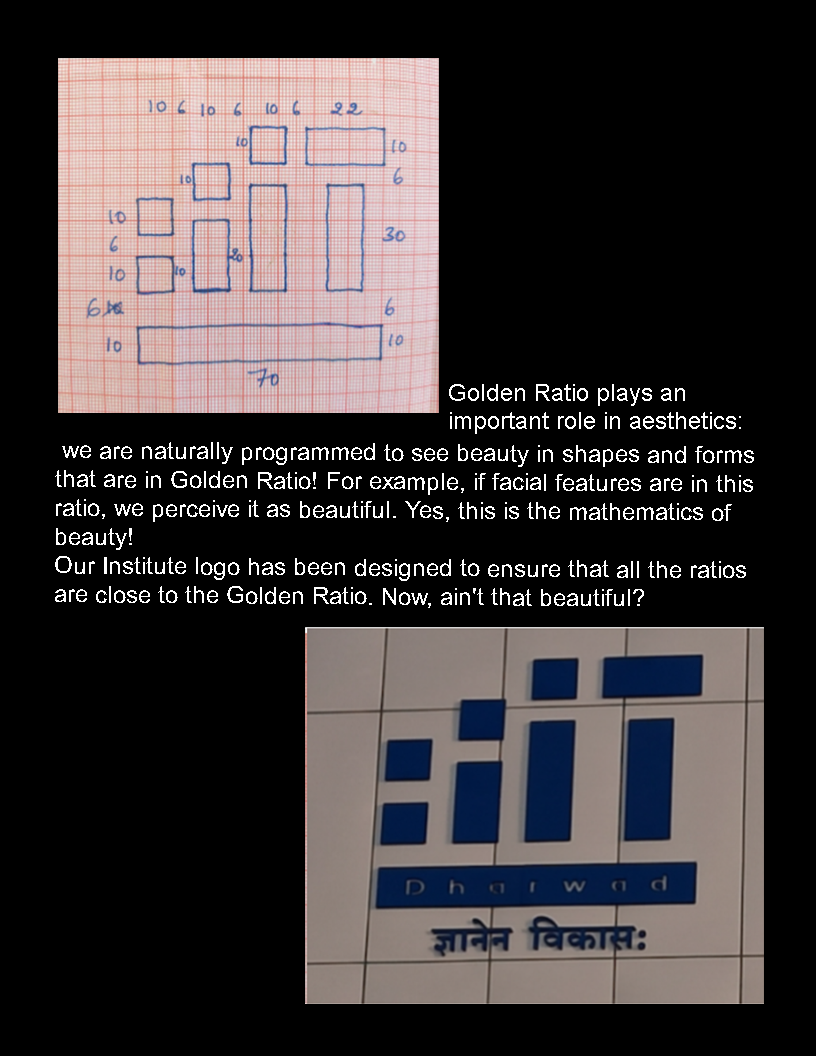
<style>
.page{position:relative;width:816px;height:1056px;background:#000000}
.page>*{position:absolute;margin:0}
.t1{font:24px "ArialMT";color:#ffffff}
</style>
<div class="page">
<p class="t1" style="left:449px;top:384px;width:292px;height:50px">Golden Ratio plays an <br>important role in aesthetics:</p>
<p class="t1" style="left:55px;top:442px;width:699px;height:166px">we are naturally programmed to see beauty in shapes and forms that are in Golden Ratio! For example, if facial features are in this ratio, we perceive it as beautiful. Yes, this is the mathematics of beauty!<br>Our Institute logo has been designed to ensure that all the ratios are close to the Golden Ratio. Now, ain't that beautiful?</p>
</div>
